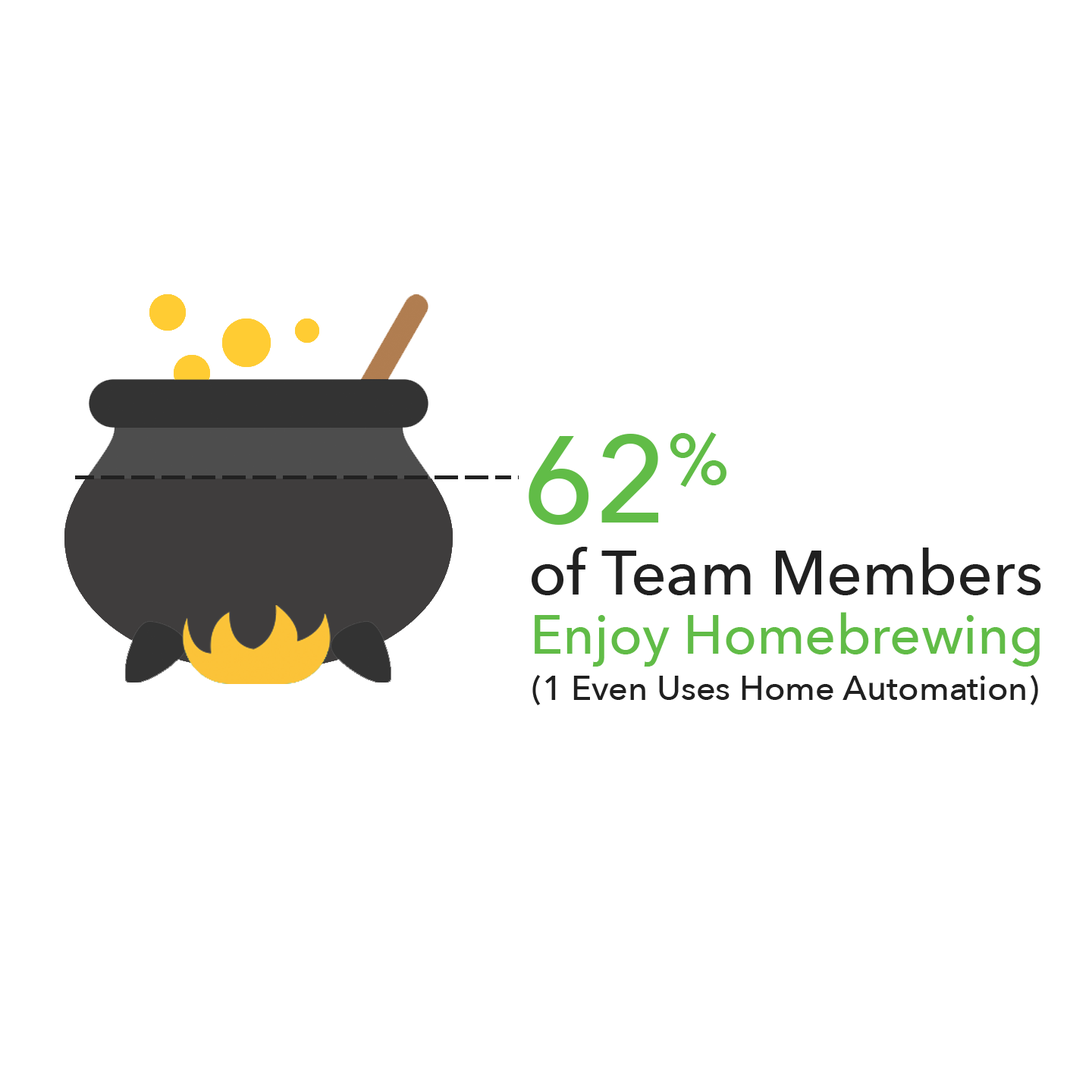
<style>
.page{position:relative;width:1092px;height:1092px;background:#ffffff}
.page>*{position:absolute;margin:0}
.t1{font:122.1px "AvenirNext-Medium";color:#61bc47}
.t2{font:71.3px "AvenirNext-Medium";color:#61bc47}
.t3{font:62.2px "AvenirNext-Medium";color:#202020}
.t4{font:54.6px "AvenirNext-Medium";color:#61bc47}
.t5{font:34.1px "AvenirNext-Medium";color:#202020}
</style>
<div class="page">
<p class="t1" style="left:529px;top:434px;width:130px;height:91px">62</p>
<p class="t2" style="left:670px;top:432px;width:56px;height:55px">%</p>
<p class="t3" style="left:532px;top:547px;width:509px;height:48px">of Team Members</p>
<p class="t4" style="left:535px;top:612px;width:505px;height:55px">Enjoy Homebrewing</p>
<p class="t5" style="left:532px;top:675px;width:506px;height:30px">(1 Even Uses Home Automation)</p>
</div>
